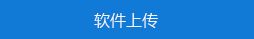
<style>
.page{position:relative;width:254px;height:39px;background:#1179d6}
.page>*{position:absolute;margin:0}
.t1{font:16px "MicrosoftYaHeiLight";color:#f8f9fa}
</style>
<div class="page">
<p class="t1" style="left:94px;top:13px;width:64px;height:15px">软件上传</p>
</div>
